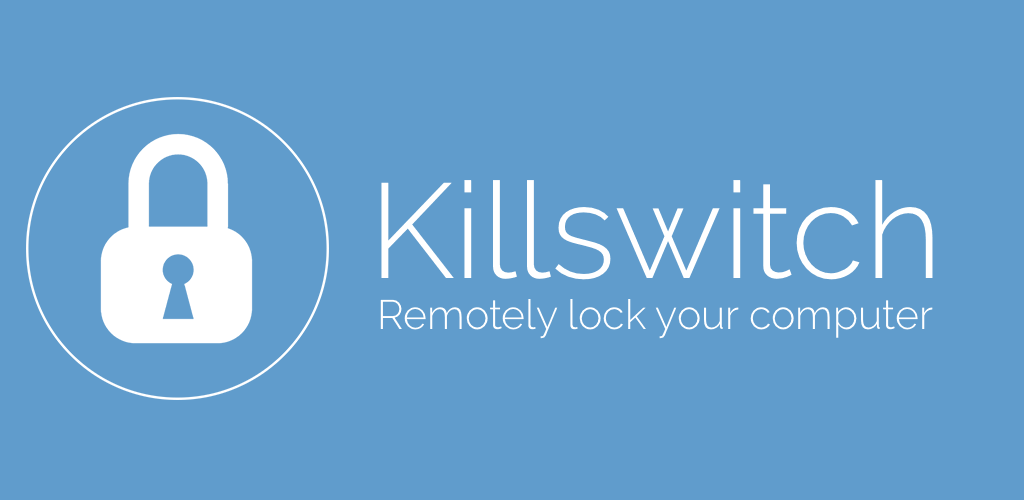
<style>
.page{position:relative;width:1024px;height:500px;background:#609ccc}
.page>*{position:absolute;margin:0}
.t1{font:134.2px "Raleway-Light";color:#ffffff}
.t2{font:41.1px "Raleway-Light";color:#ffffff}
</style>
<div class="page">
<p class="t1" style="left:381px;top:180px;width:552px;height:100px">Killswitch</p>
<p class="t2" style="left:380px;top:299px;width:553px;height:40px">Remotely lock your computer</p>
</div>
